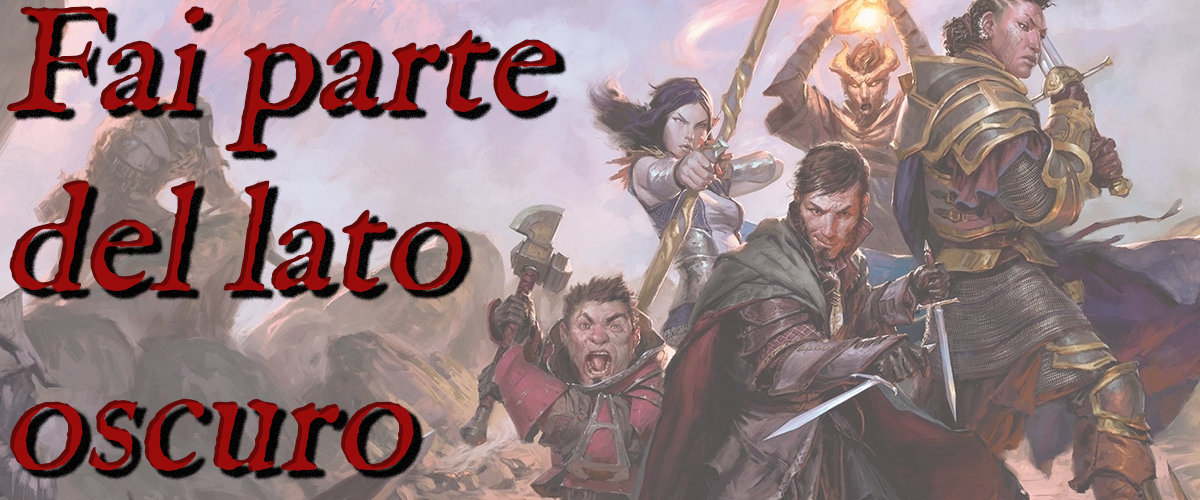
<style>
.page{position:relative;width:1200px;height:500px}
.page>*{position:absolute;margin:0}
.t1{font:150px "IM_FELL_English_Roman";color:#9a0c0c;font-style:italic}
</style>
<div class="page">
<p class="t1" style="left:7px;top:6px;width:550px;height:465px">Fai parte<br>del lato <br>oscuro</p>
</div>
